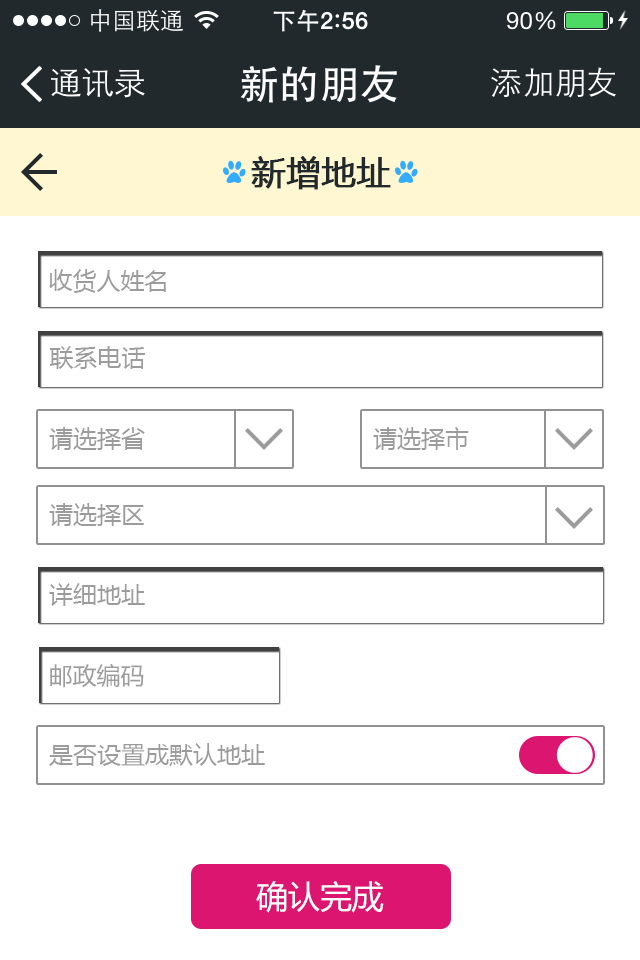
<style>
.page{position:relative;width:640px;height:960px;background:#ffffff}
.page>*{position:absolute;margin:0}
.t1{font:34px "MicrosoftYaHei";color:#22292c;font-weight:bold}
.t2{font:24px "MicrosoftYaHei";color:#9c9c9c}
.t3{font:32.4px "MicrosoftYaHei";color:#ffffff}
</style>
<div class="page">
<p class="t1" style="left:251px;top:156px;width:140px;height:34px">新增地址</p>
<p class="t2" style="left:49px;top:269px;width:117px;height:24px">收货人姓名</p>
<p class="t2" style="left:49px;top:346px;width:96px;height:23px">联系电话</p>
<p class="t2" style="left:49px;top:427px;width:96px;height:23px">请选择省</p>
<p class="t2" style="left:373px;top:427px;width:96px;height:23px">请选择市</p>
<p class="t2" style="left:49px;top:503px;width:95px;height:23px">请选择区</p>
<p class="t2" style="left:49px;top:583px;width:96px;height:23px">详细地址</p>
<p class="t2" style="left:50px;top:664px;width:94px;height:24px">邮政编码</p>
<p class="t2" style="left:49px;top:743px;width:216px;height:23px">是否设置成默认地址</p>
<p class="t3" style="left:256px;top:881px;width:128px;height:32px">确认完成</p>
</div>
